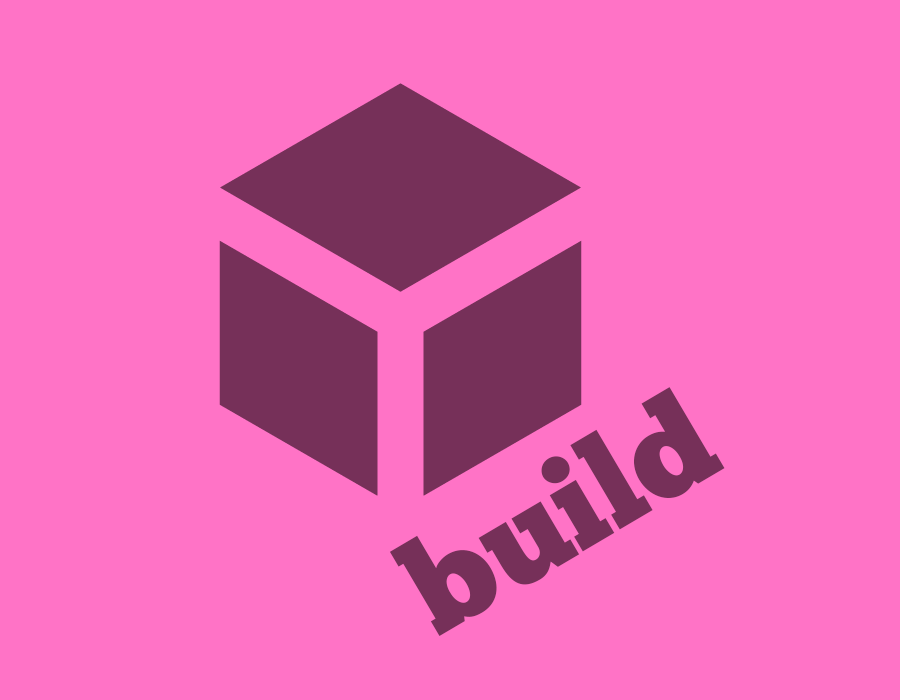
<style>
.page{position:relative;width:900px;height:700px;background:#ff73c6}
.page>*{position:absolute;margin:0}
.t1{font:130.1px "ChunkFive-Roman";color:#763059}
</style>
<div class="page">
<p class="t1" style="left:389px;top:387px;width:336px;height:249px;rotate:-30deg">build</p>
</div>
